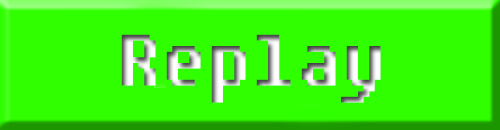
<style>
.page{position:relative;width:500px;height:130px;background:#30ff00}
.page>*{position:absolute;margin:0}
.t1{font:72px "Fixedsys"}
</style>
<div class="page">
<p class="t1" style="left:121px;top:34px;width:260px;height:69px">Replay</p>
</div>
